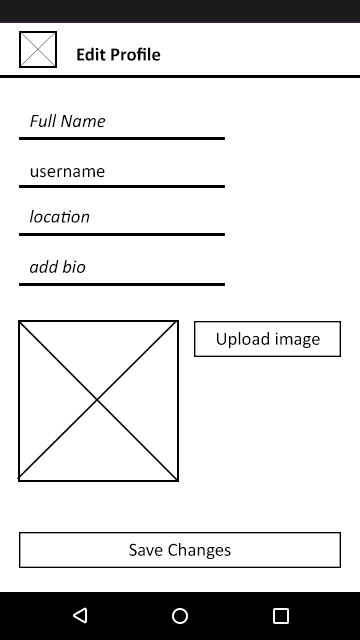
<style>
.page{position:relative;width:360px;height:640px;background:#ffffff}
.page>*{position:absolute;margin:0}
.t1{font:18.9px "Calibri-Bold";color:#000000}
.t2{font:19px "Calibri-Italic";color:#000000}
.t3{font:19px "Calibri";color:#000000}
.t4{font:18.7px "Calibri-Italic";color:#000000}
.t5{font:18.6px "Calibri-Italic";color:#000000}
.t6{font:18.6px "Calibri";color:#000000}
</style>
<div class="page">
<p class="t1" style="left:77px;top:47px;width:84px;height:14px">Edit Profile</p>
<p class="t2" style="left:30px;top:114px;width:76px;height:14px">Full Name</p>
<p class="t3" style="left:30px;top:168px;width:75px;height:10px">username</p>
<p class="t4" style="left:29px;top:209px;width:61px;height:14px">location</p>
<p class="t5" style="left:30px;top:260px;width:56px;height:13px">add bio</p>
<p class="t6" style="left:217px;top:332px;width:103px;height:16px">Upload image</p>
<p class="t6" style="left:129px;top:543px;width:102px;height:16px">Save Changes</p>
</div>
